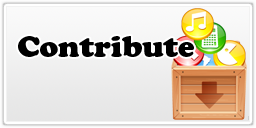
<style>
.page{position:relative;width:256px;height:128px}
.page>*{position:absolute;margin:0}
.t1{font:30px "CooperBlackStd";color:#000000}
</style>
<div class="page">
<p class="t1" style="left:18px;top:36px;width:176px;height:21px">Contribute</p>
</div>
